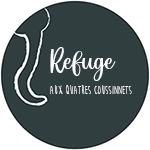
<style>
.page{position:relative;width:150px;height:150px;background:#313e40}
.page>*{position:absolute;margin:0}
.t1{font:22px "Dearlove";letter-spacing:-0.009em;color:#ffffff}
.t2{font:12px "MoonFlower";letter-spacing:-0.009em;color:#ffffff}
</style>
<div class="page">
<p class="t1" style="left:50px;top:47px;width:66px;height:34px">Refuge</p>
<p class="t2" style="left:50px;top:85px;width:82px;height:9px">aux quatres coussinnets</p>
</div>
